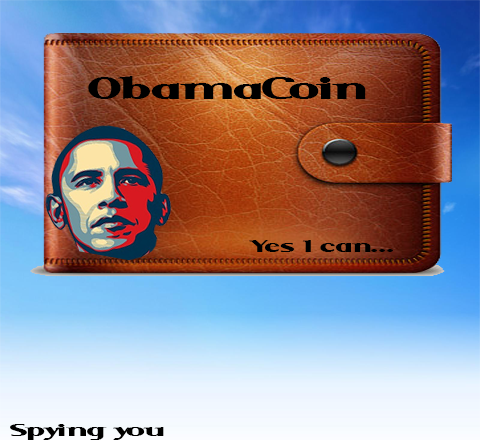
<style>
.page{position:relative;width:480px;height:440px}
.page>*{position:absolute;margin:0}
.t1{font:34.1px "SerifBlack";letter-spacing:0.025em;color:#000000;scale:1.78 1}
.t2{font:18.9px "SerifBlack";letter-spacing:0.025em;color:#000000;scale:1.79 1}
.t3{font:18.9px "SerifBlack";letter-spacing:0.025em;color:#000000;scale:1.93 1}
</style>
<div class="page">
<p class="t1" style="left:88px;top:76px;width:278px;height:23px">ObamaCoin</p>
<p class="t2" style="left:249px;top:240px;width:144px;height:12px">Yes I can...</p>
<p class="t3" style="left:10px;top:424px;width:154px;height:16px">Spying you</p>
</div>
